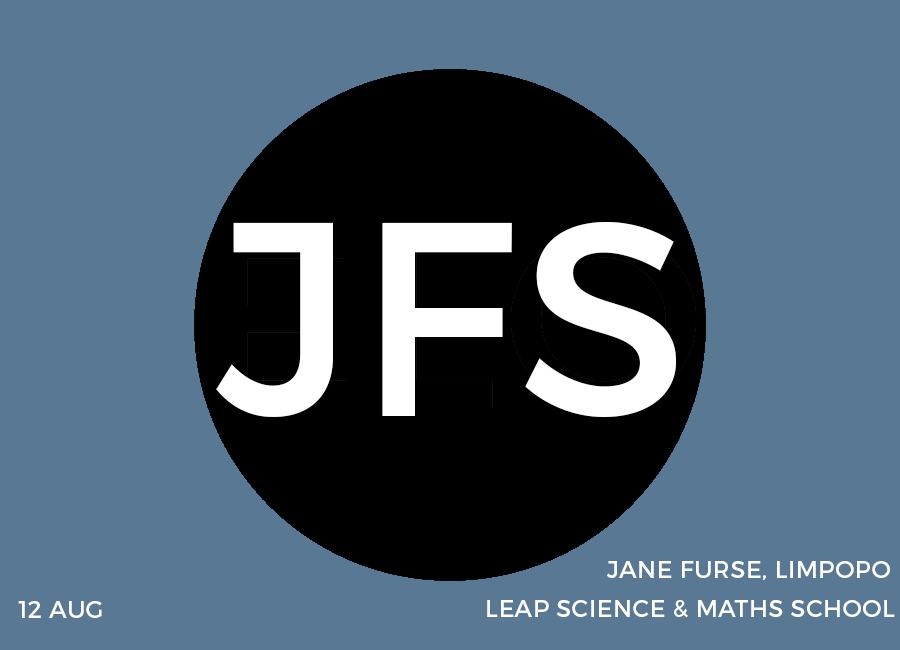
<style>
.page{position:relative;width:900px;height:650px;background:#587894}
.page>*{position:absolute;margin:0}
.t1{font:275px "Montserrat-Regular";letter-spacing:0.01em;color:#ffffff}
.t2{font:24px "Montserrat-Regular";letter-spacing:0.02em;color:#ffffff}
</style>
<div class="page">
<p class="t1" style="left:216px;top:222px;width:460px;height:195px">JFS</p>
<p class="t2" style="left:607px;top:561px;width:283px;height:19px">JANE FURSE, LIMPOPO</p>
<p class="t2" style="left:18px;top:601px;width:84px;height:17px">12 AUG</p>
<p class="t2" style="left:487px;top:600px;width:408px;height:18px">LEAP SCIENCE &amp; MATHS SCHOOL</p>
</div>
